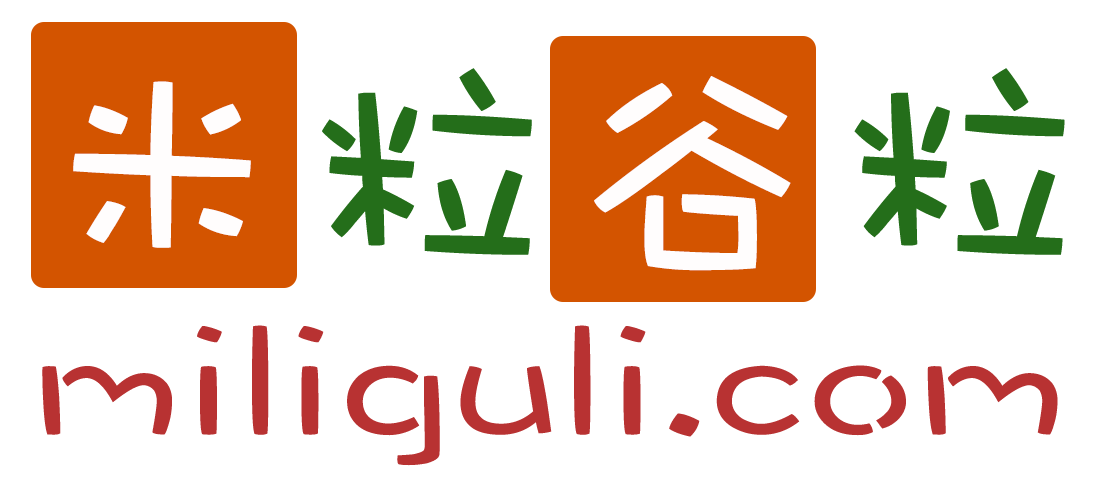
<style>
.page{position:relative;width:1101px;height:487px;background:#ffffff}
.page>*{position:absolute;margin:0}
.t1{font:260px "DFWaWaSC-W5";letter-spacing:0.025em;color:#fffdfd}
.t2{font:260px "DFWaWaSC-W5";letter-spacing:0.025em;color:#246e1a}
.t3{font:162.2px "DFWaWaSC-W5";letter-spacing:0.025em;color:#b83232;scale:1.29 1}
</style>
<div class="page">
<p class="t1" style="left:73px;top:68px;width:992px;height:203px">米<span class="t2">粒</span>谷<span class="t2">粒</span></p>
<p class="t3" style="left:42px;top:325px;width:1016px;height:141px">miliguli.com</p>
</div>
